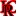
<style>
.page{position:relative;width:16px;height:16px}
.page>*{position:absolute;margin:0}
.t1{font:18px "Minion-Bold";color:#410000}
.t2{font:18px "Minion-Bold"}
</style>
<div class="page">
<p class="t1" style="left:0px;top:0px;width:7px;height:13px">I</p>
<p class="t2" style="left:2px;top:4px;width:12px;height:13px">R</p>
<p class="t2" style="left:6px;top:0px;width:12px;height:13px">C</p>
</div>
